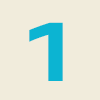
<style>
.page{position:relative;width:100px;height:100px;background:#f1ecdc}
.page>*{position:absolute;margin:0}
.t1{font:85px "AllumiStdExtended-ExtraBold";color:#0cb4d2}
</style>
<div class="page">
<p class="t1" style="left:29px;top:22px;width:34px;height:59px">1</p>
</div>
